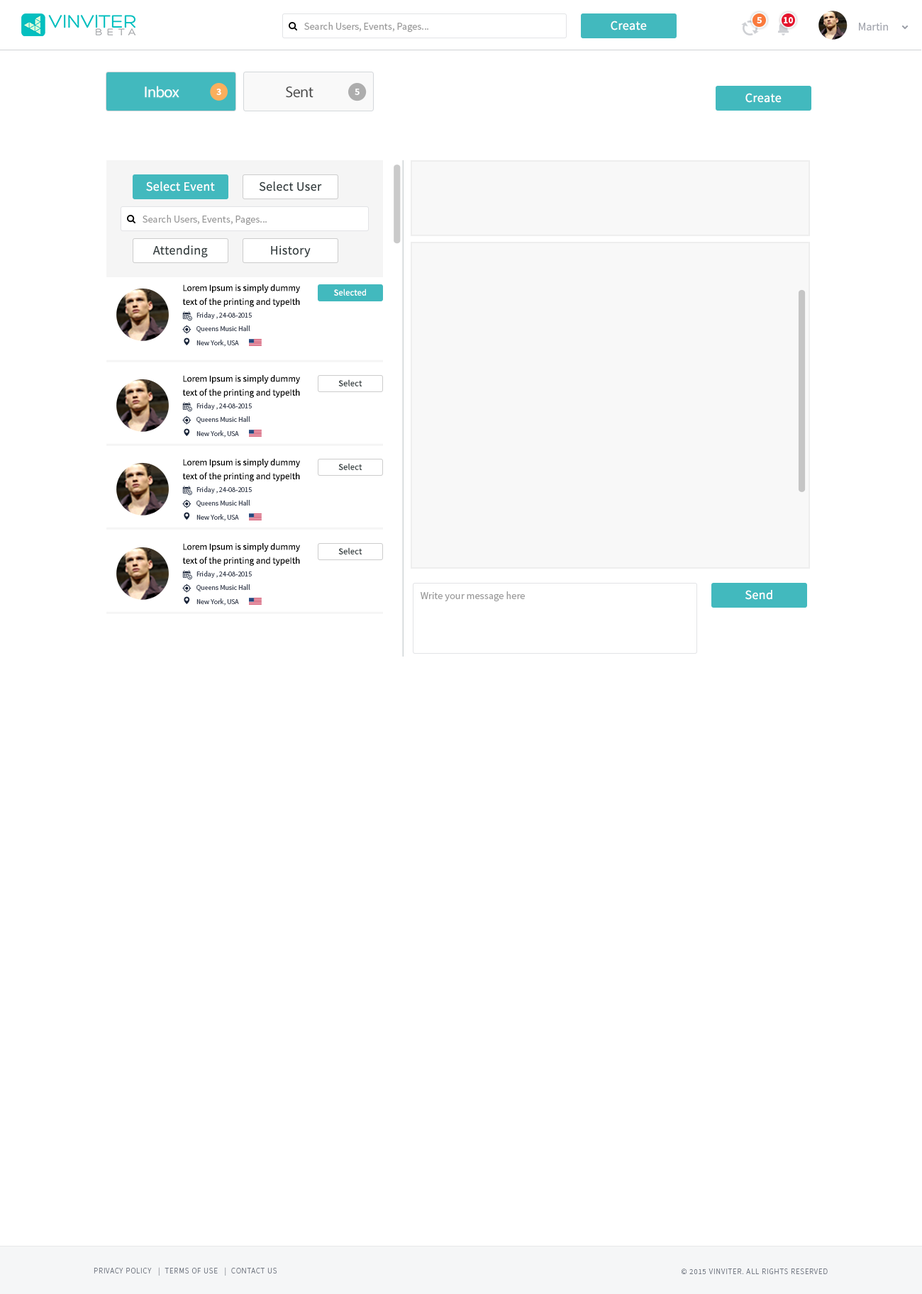
<style>
.page{position:relative;width:922px;height:1294px;background:#ffffff}
.page>*{position:absolute;margin:0}
.t1{font:9.2px "SourceSansPro-Bold";color:#ffffff}
.t2{font:10.2px "SourceSansPro-Regular";color:#999999}
.t3{font:12.8px "SourceSansPro-Regular";letter-spacing:0.02em;color:#ffffff}
.t4{font:11.3px "SourceSansPro-Regular";color:#a3a6ae}
.t5{font:15.6px "MyriadPro-Regular";letter-spacing:-0.025em;color:#ffffff}
.t6{font:9.9px "SourceSansPro-Bold";letter-spacing:-0.025em;color:#ffffff}
.t7{font:15.6px "MyriadPro-Regular";letter-spacing:-0.025em;color:#4b4b4b}
.t8{font:12.8px "SourceSansPro-Regular";letter-spacing:0.02em;color:#363f41}
.t9{font:9.2px/13.8px "SourceSansPro-Regular";color:#000000}
.t10{font:8.8px "SourceSansPro-Regular";letter-spacing:0.02em;color:#ffffff}
.t11{font:7.1px/9.2px "SourceSansPro-Regular";color:#464d5c}
.t12{font:8.8px "SourceSansPro-Regular";letter-spacing:0.02em;color:#363f41}
.t13{font:7.8px "SourceSansPro-Light";letter-spacing:0.075em;color:#747a85;text-transform:uppercase}
</style>
<div class="page">
<p class="t1" style="left:756px;top:17px;width:5px;height:6px">5</p>
<p class="t1" style="left:783px;top:17px;width:10px;height:6px">10</p>
<p class="t2" style="left:304px;top:22px;width:124px;height:11px">Search Users, Events, Pages...</p>
<p class="t3" style="left:610px;top:21px;width:37px;height:9px">Create</p>
<p class="t4" style="left:859px;top:23px;width:29px;height:7px">Martin</p>
<p class="t5" style="left:145px;top:86px;width:34px;height:12px">Inbox</p>
<p class="t6" style="left:216px;top:89px;width:5px;height:6px">3</p>
<p class="t7" style="left:286px;top:86px;width:27px;height:12px">Sent</p>
<p class="t6" style="left:354px;top:89px;width:5px;height:6px">5</p>
<p class="t3" style="left:745px;top:93px;width:36px;height:10px">Create</p>
<p class="t3" style="left:146px;top:181px;width:69px;height:10px">Select Event</p>
<p class="t8" style="left:259px;top:181px;width:63px;height:10px">Select User</p>
<p class="t2" style="left:142px;top:215px;width:125px;height:10px">Search Users, Events, Pages...</p>
<p class="t8" style="left:152px;top:245px;width:56px;height:12px">Attending</p>
<p class="t8" style="left:271px;top:245px;width:40px;height:12px">History</p>
<p class="t9" style="left:182px;top:284px;width:118px;height:23px">Lorem Ipsum is simply dummy <br>text of the printing and typeIth</p>
<p class="t10" style="left:334px;top:289px;width:32px;height:7px">Selected</p>
<p class="t11" style="left:196px;top:312px;width:56px;height:35px">Friday , 24-08-2015<br>Queens Music Hall<br>New York, USA</p>
<p class="t9" style="left:182px;top:375px;width:118px;height:23px">Lorem Ipsum is simply dummy <br>text of the printing and typeIth</p>
<p class="t12" style="left:338px;top:379px;width:24px;height:7px">Select</p>
<p class="t11" style="left:196px;top:403px;width:56px;height:34px">Friday , 24-08-2015<br>Queens Music Hall<br>New York, USA</p>
<p class="t9" style="left:182px;top:459px;width:118px;height:22px">Lorem Ipsum is simply dummy <br>text of the printing and typeIth</p>
<p class="t12" style="left:338px;top:463px;width:24px;height:7px">Select</p>
<p class="t11" style="left:196px;top:486px;width:56px;height:35px">Friday , 24-08-2015<br>Queens Music Hall<br>New York, USA</p>
<p class="t9" style="left:182px;top:543px;width:118px;height:23px">Lorem Ipsum is simply dummy <br>text of the printing and typeIth</p>
<p class="t12" style="left:338px;top:547px;width:24px;height:7px">Select</p>
<p class="t11" style="left:196px;top:571px;width:56px;height:34px">Friday , 24-08-2015<br>Queens Music Hall<br>New York, USA</p>
<p class="t2" style="left:420px;top:591px;width:105px;height:11px">Write your message here</p>
<p class="t3" style="left:745px;top:590px;width:27px;height:10px">Send</p>
<p class="t13" style="left:94px;top:1267px;width:183px;height:8px">Privacy Policy   |  Terms of Use   |  Contact us</p>
<p class="t13" style="left:681px;top:1268px;width:146px;height:6px">© 2015 VINVITER. All rights reserved</p>
</div>
